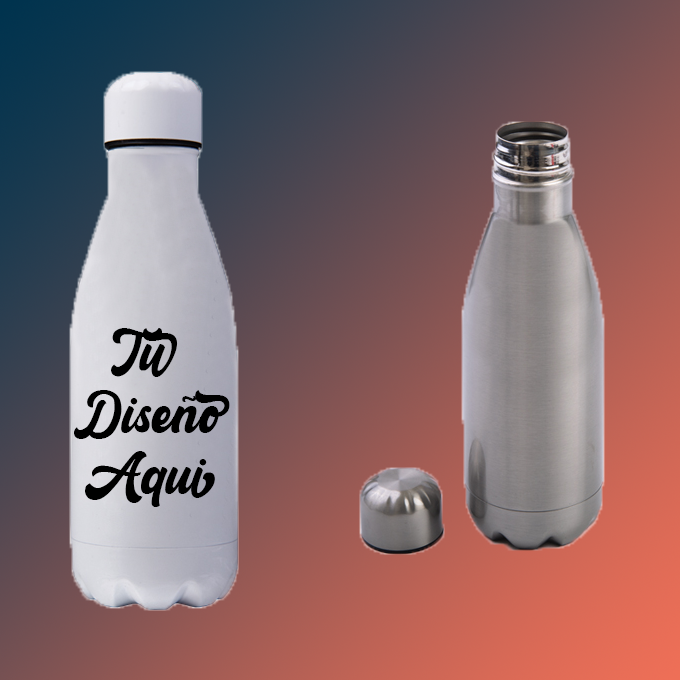
<style>
.page{position:relative;width:680px;height:680px}
.page>*{position:absolute;margin:0}
.t1{font:51px "RetrowMentho";color:#000000}
</style>
<div class="page">
<p class="t1" style="left:74px;top:328px;width:156px;height:179px;text-align:center">Tu <br>Diseño<br>Aqui</p>
</div>
